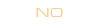
<style>
.page{position:relative;width:100px;height:25px;background:#ffffff}
.page>*{position:absolute;margin:0}
.t1{font:14px "MicrogrammaD-MediExte";letter-spacing:0.075em;color:#f7d093}
</style>
<div class="page">
<p class="t1" style="left:36px;top:8px;width:27px;height:9px">NO</p>
</div>
